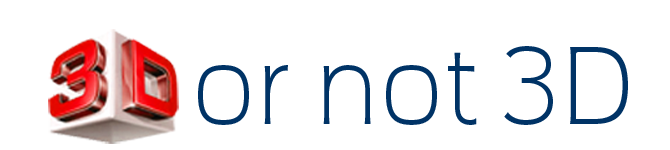
<style>
.page{position:relative;width:670px;height:150px;background:#ffffff}
.page>*{position:absolute;margin:0}
.t1{font:99.8px "Vezus-Light";color:#003366;scale:0.91 1}
</style>
<div class="page">
<p class="t1" style="left:198px;top:46px;width:430px;height:79px">or not 3D</p>
</div>
